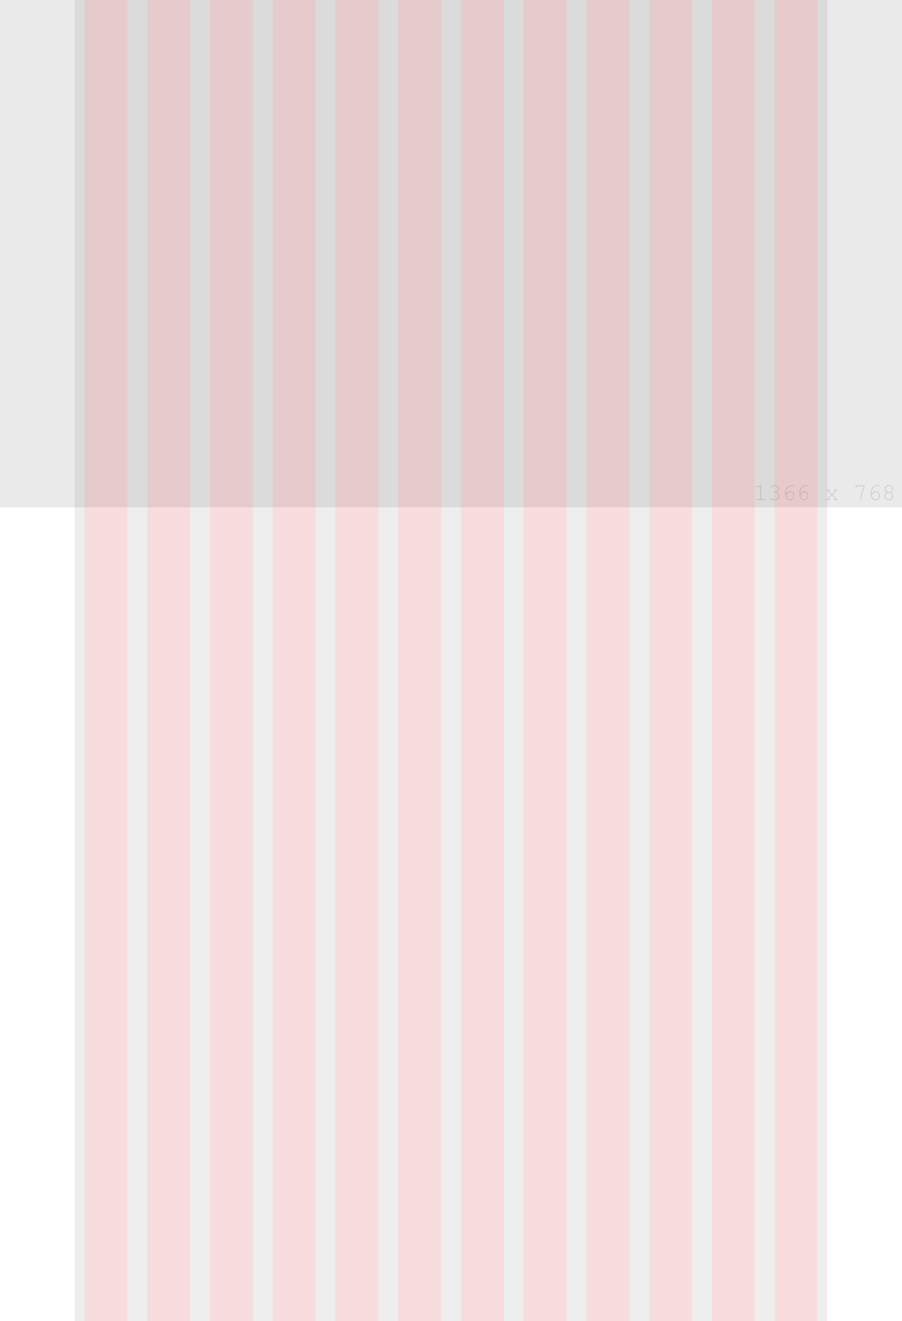
<style>
.page{position:relative;width:902px;height:1321px;background:#f7dddd}
.page>*{position:absolute;margin:0}
.t1{font:23.8px "CourierNewPSMT"}
</style>
<div class="page">
<p class="t1" style="left:756px;top:485px;width:138px;height:16px">1366 x 768</p>
</div>
